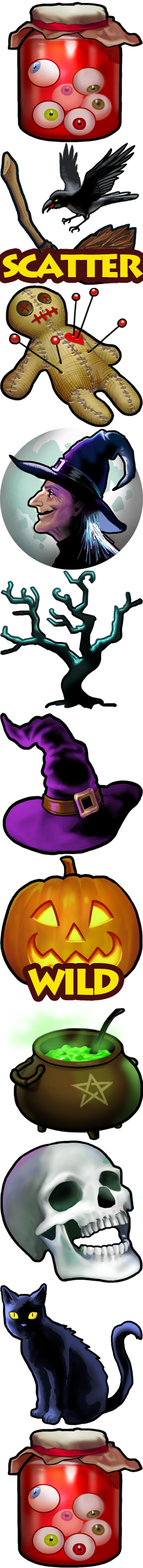
<style>
.page{position:relative;width:143px;height:1568px;background:#ffffff}
.page>*{position:absolute;margin:0}
.t1{font:32px "LithosPro-Black";letter-spacing:-0.1em;color:#f9e509;scale:1.06 1}
.t2{font:36.4px "LithosPro-Black";letter-spacing:-0.1em;color:#f9e509;scale:0.96 1}
</style>
<div class="page">
<p class="t1" style="left:2px;top:253px;width:141px;height:25px">SCATTER</p>
<p class="t2" style="left:28px;top:968px;width:91px;height:29px">WILD</p>
</div>
